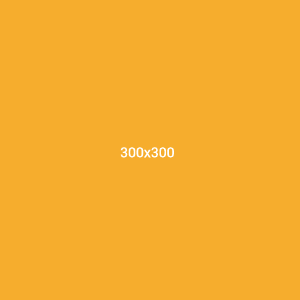
<style>
.page{position:relative;width:300px;height:300px;background:#f6ad2d}
.page>*{position:absolute;margin:0}
.t1{font:14px "Roboto-Regular";color:#ffffff}
</style>
<div class="page">
<p class="t1" style="left:120px;top:147px;width:54px;height:11px">300x300</p>
</div>
